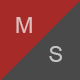
<style>
.page{position:relative;width:80px;height:80px;background:#a62a28}
.page>*{position:absolute;margin:0}
.t1{font:22px "ArialMT";color:#debdbc}
.t2{font:22px "ArialMT";color:#c3c3c3}
</style>
<div class="page">
<p class="t1" style="left:16px;top:17px;width:16px;height:16px">M</p>
<p class="t2" style="left:49px;top:46px;width:13px;height:16px">S</p>
</div>
